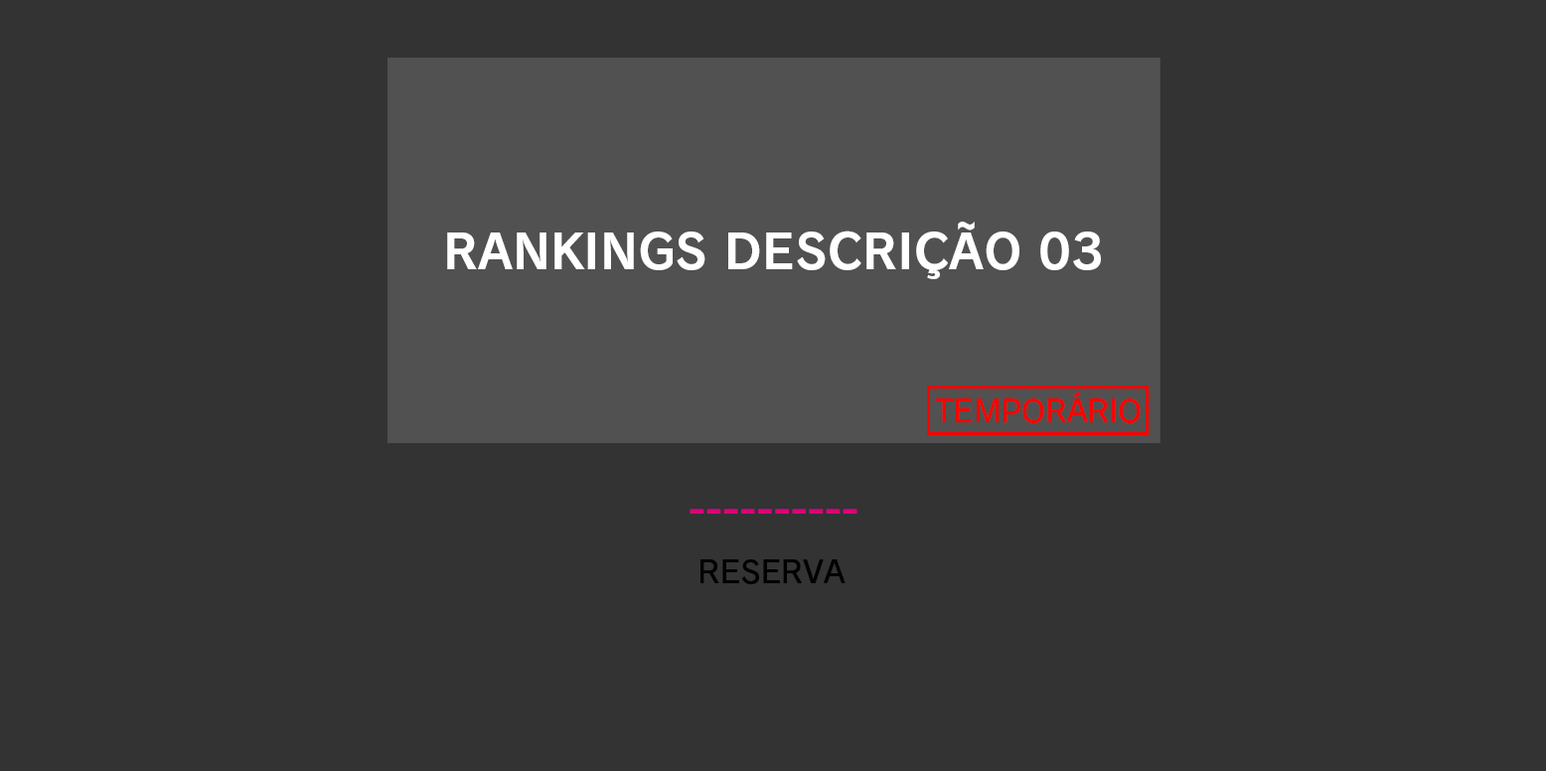
<style>
.page{position:relative;width:1546px;height:771px;background:#333333}
.page>*{position:absolute;margin:0}
.t1{font:47.7px "RodinNTLGPro-B";color:#ffffff}
.t2{font:30.5px "RodinProN-DB";letter-spacing:-0.014em;color:#ff0000}
.t3{font:30.5px "RodinNTLGPro-DB";color:#010101}
</style>
<div class="page">
<p class="t1" style="left:447px;top:222px;width:654px;height:57px">RANKINGS DESCRIÇÃO 03</p>
<p class="t2" style="left:935px;top:392px;width:206px;height:31px">TEMPORÁRIO</p>
<p class="t3" style="left:701px;top:559px;width:145px;height:25px">RESERVA</p>
</div>
